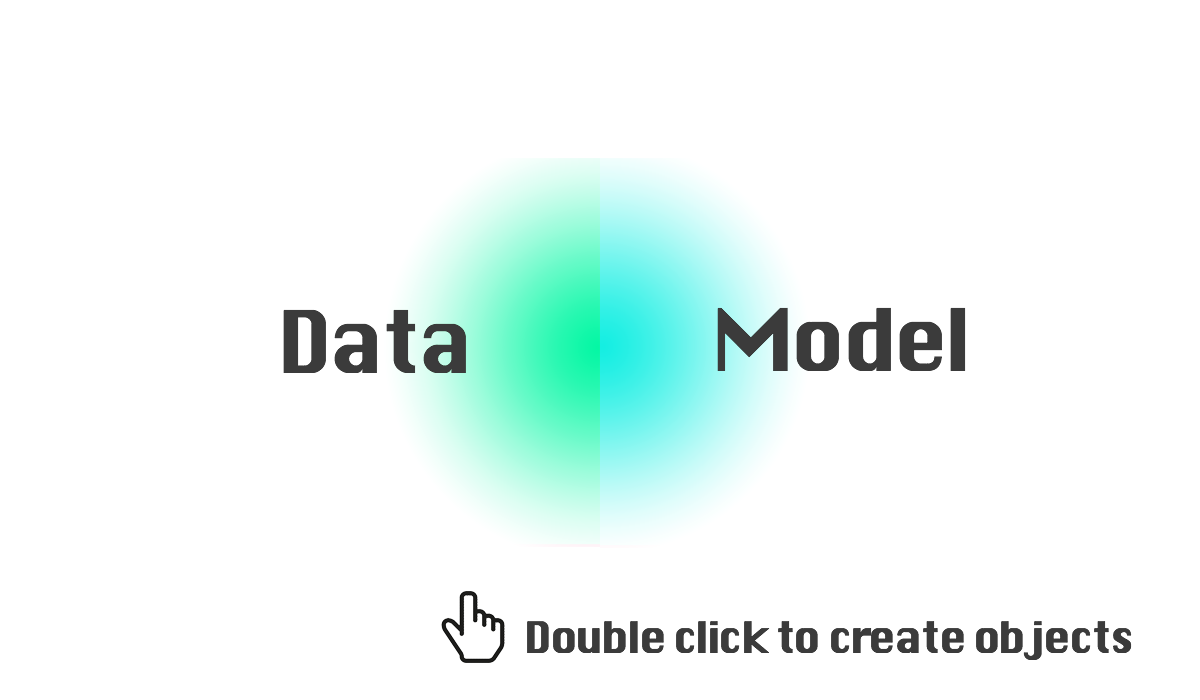
<style>
.page{position:relative;width:1200px;height:700px;background:#ffffff}
.page>*{position:absolute;margin:0}
.t1{font:83.3px "Silom";letter-spacing:-0.05em;color:#3b3b3b}
.t2{font:41.7px "Silom";letter-spacing:-0.05em;color:#3b3b3b}
</style>
<div class="page">
<p class="t1" style="left:283px;top:309px;width:183px;height:64px">Data</p>
<p class="t1" style="left:717px;top:307px;width:249px;height:64px">Model</p>
<p class="t2" style="left:527px;top:621px;width:605px;height:39px">Double click to create objects</p>
</div>
